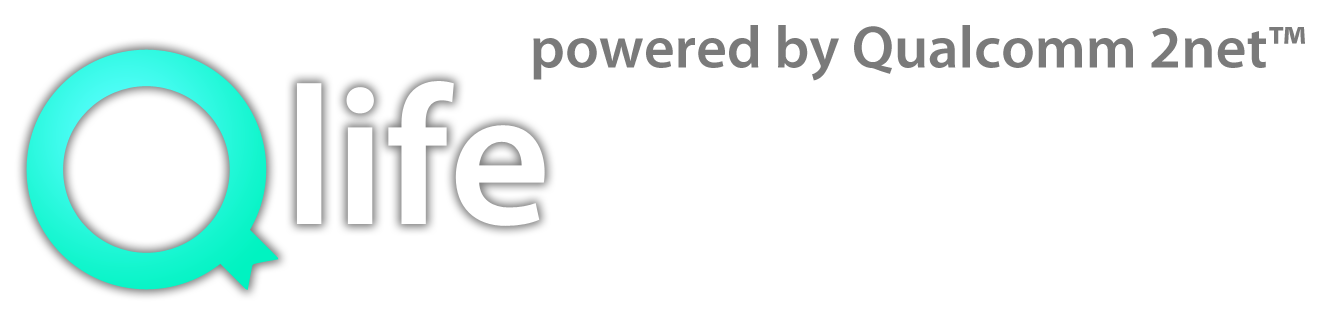
<style>
.page{position:relative;width:1330px;height:330px;background:#ffffff}
.page>*{position:absolute;margin:0}
.t1{font:60px "MyriadPro-Semibold";color:#7a7a7a}
</style>
<div class="page">
<p class="t1" style="left:533px;top:25px;width:772px;height:56px">powered by Qualcomm 2net™</p>
</div>
